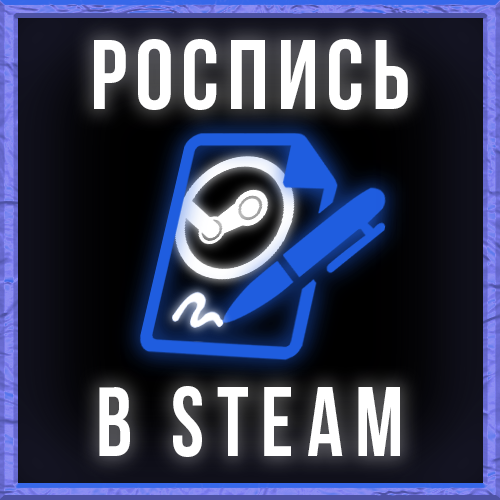
<style>
.page{position:relative;width:500px;height:500px}
.page>*{position:absolute;margin:0}
.t1{font:98px "BebasNeueBold";letter-spacing:0.08em;color:#ffffff}
.t2{font:98px "BebasNeueBold";letter-spacing:0.14em;color:#ffffff;scale:0.91 1}
</style>
<div class="page">
<p class="t1" style="left:94px;top:39px;width:314px;height:71px">роспись</p>
<p class="t2" style="left:99px;top:386px;width:301px;height:71px">в steam</p>
</div>
